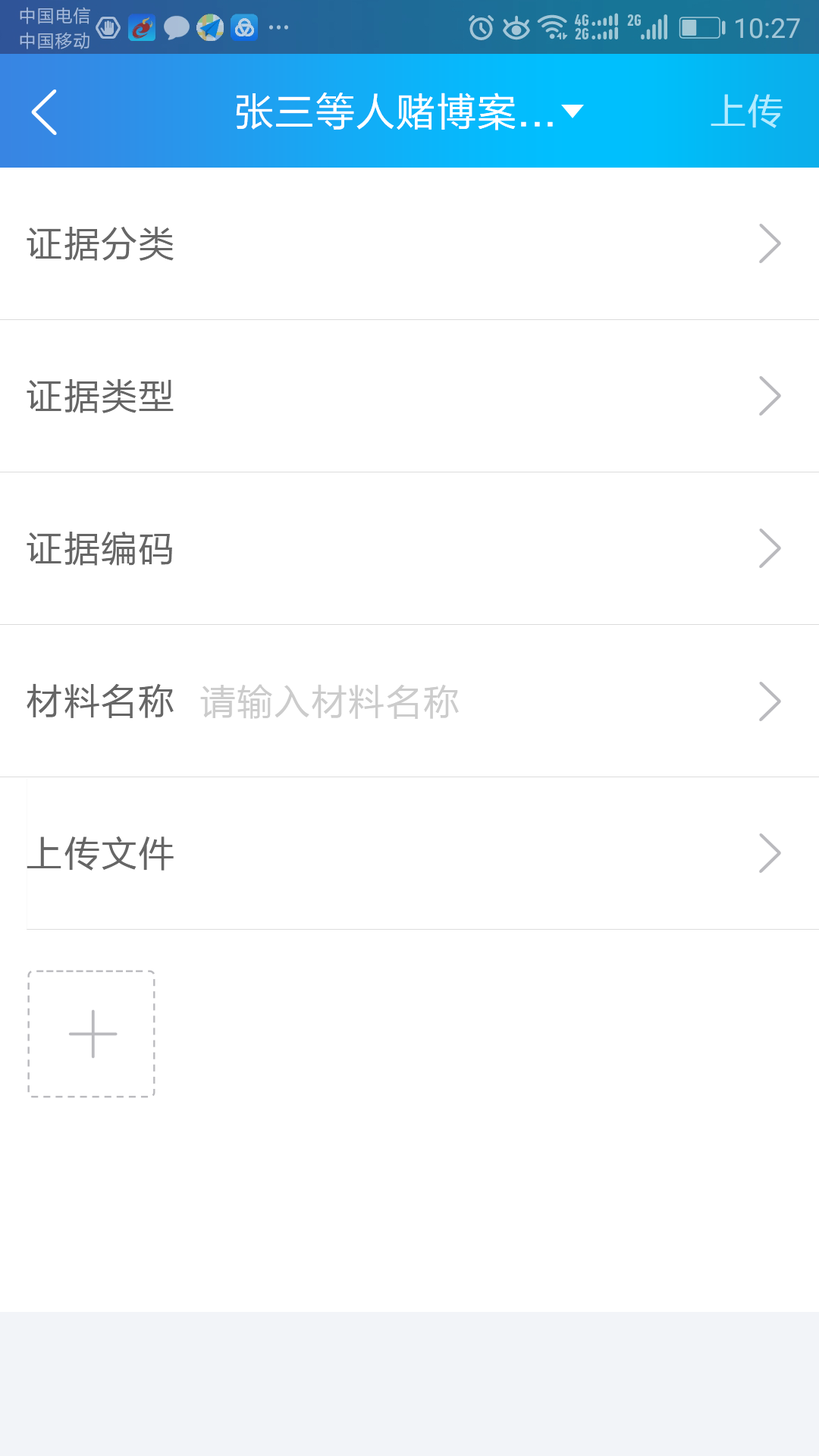
<style>
.page{position:relative;width:819px;height:1456px;background:#ffffff}
.page>*{position:absolute;margin:0}
.t1{font:39.4px "FZLTHK--GBK1-0";letter-spacing:0.025em;color:#ffffff}
.t2{font:36.4px "FZLTHK--GBK1-0";letter-spacing:0.025em;color:#b2ebff}
.t3{font:36.4px "FZLTHK--GBK1-0";letter-spacing:0.025em;color:#666666}
.t4{font:36.4px "FZLTHK--GBK1-0";letter-spacing:0.025em;color:#cccccc}
</style>
<div class="page">
<p class="t1" style="left:236px;top:93px;width:317px;height:37px">张三等人赌博案...</p>
<p class="t2" style="left:711px;top:94px;width:72px;height:34px">上传</p>
<p class="t3" style="left:27px;top:226px;width:147px;height:35px">证据分类</p>
<p class="t3" style="left:27px;top:378px;width:147px;height:35px">证据类型</p>
<p class="t3" style="left:27px;top:532px;width:145px;height:34px">证据编码</p>
<p class="t3" style="left:27px;top:683px;width:147px;height:35px">材料名称</p>
<p class="t4" style="left:200px;top:684px;width:259px;height:35px">请输入材料名称</p>
<p class="t3" style="left:27px;top:836px;width:147px;height:35px">上传文件</p>
</div>
